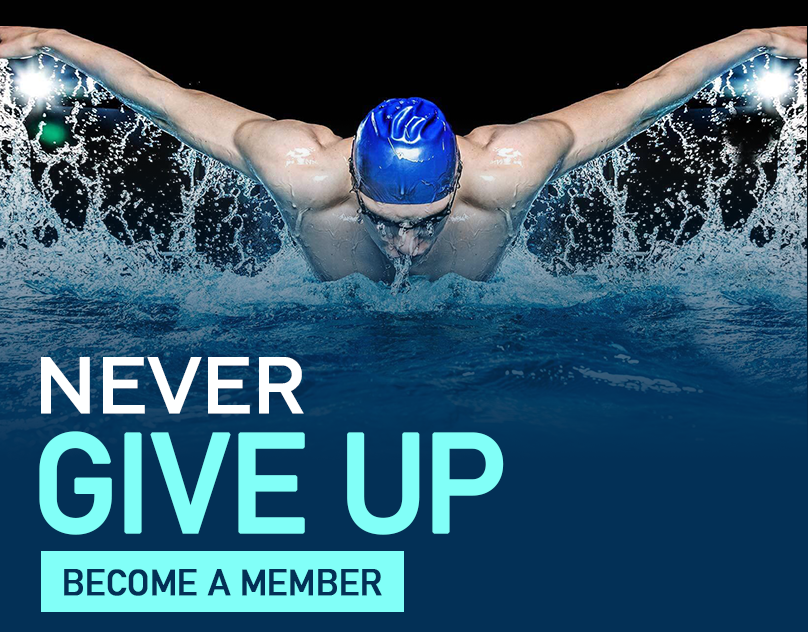
<style>
.page{position:relative;width:808px;height:632px;background:#033056}
.page>*{position:absolute;margin:0}
.t1{font:80px "TTNorms-Medium";letter-spacing:-0.038em;color:#feffff;font-weight:bold}
.t2{font:138px "Bahnschrift";letter-spacing:-0.06em;color:#81fff8;font-weight:bold}
.t3{font:36px "Bahnschrift";letter-spacing:-0.04em;color:#033056;font-weight:bold}
</style>
<div class="page">
<p class="t1" style="left:41px;top:357px;width:263px;height:57px">NEVER</p>
<p class="t2" style="left:39px;top:431px;width:465px;height:104px">GIVE UP</p>
<p class="t3" style="left:64px;top:569px;width:318px;height:27px">BECOME A MEMBER</p>
</div>
